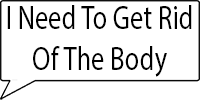
<style>
.page{position:relative;width:200px;height:100px;background:#ffffff}
.page>*{position:absolute;margin:0}
.t1{font:33.5px "MyriadPro-Regular";color:#000000;scale:0.79 1}
</style>
<div class="page">
<p class="t1" style="left:7px;top:5px;width:185px;height:72px;text-align:center">I Need To Get Rid<br>Of The Body</p>
</div>
